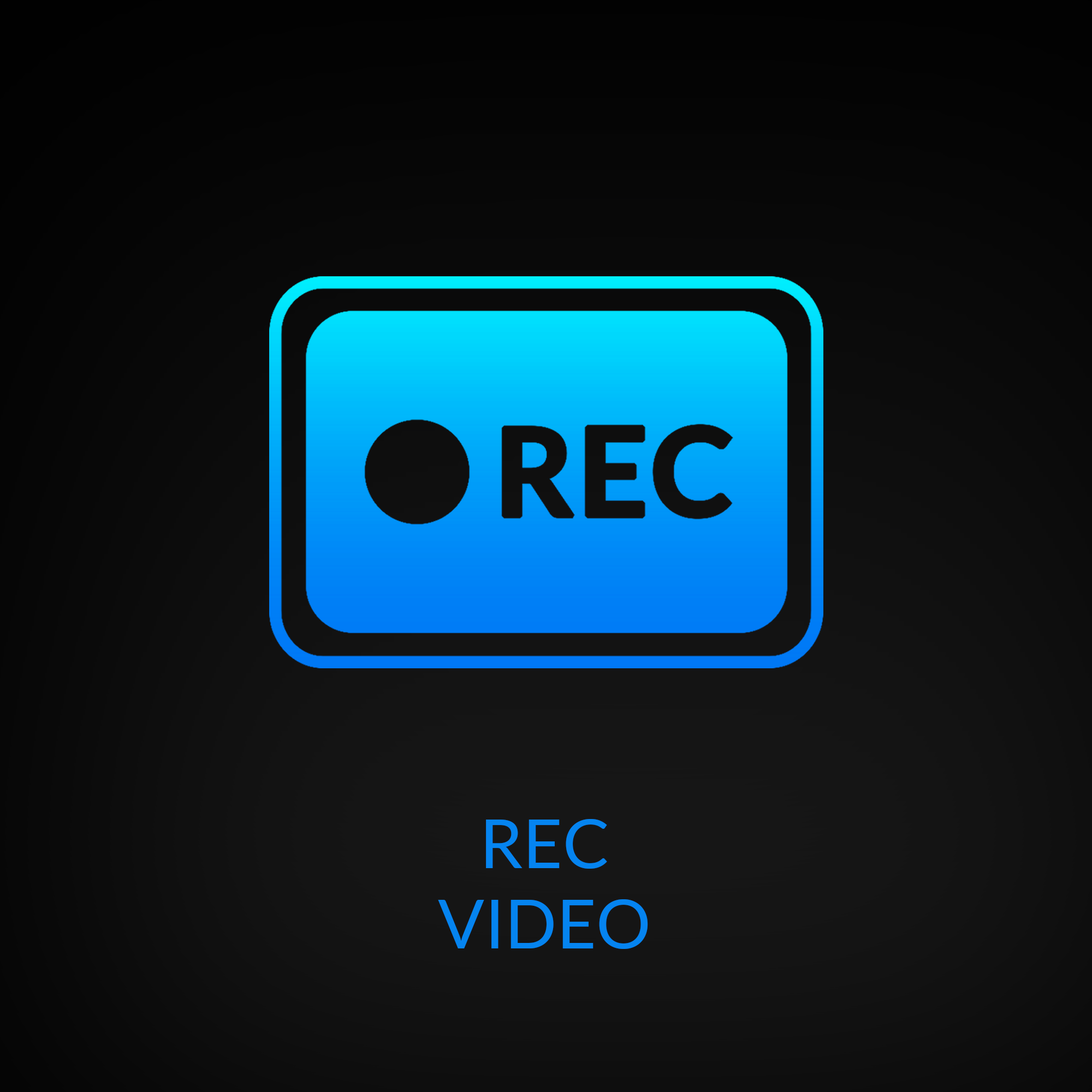
<style>
.page{position:relative;width:1092px;height:1092px}
.page>*{position:absolute;margin:0}
.t1{font:68.2px/80.2px "Lato-Regular";color:#0584f0}
</style>
<div class="page">
<p class="t1" style="left:438px;top:819px;width:210px;height:130px;text-align:center">REC<br>VIDEO</p>
</div>
